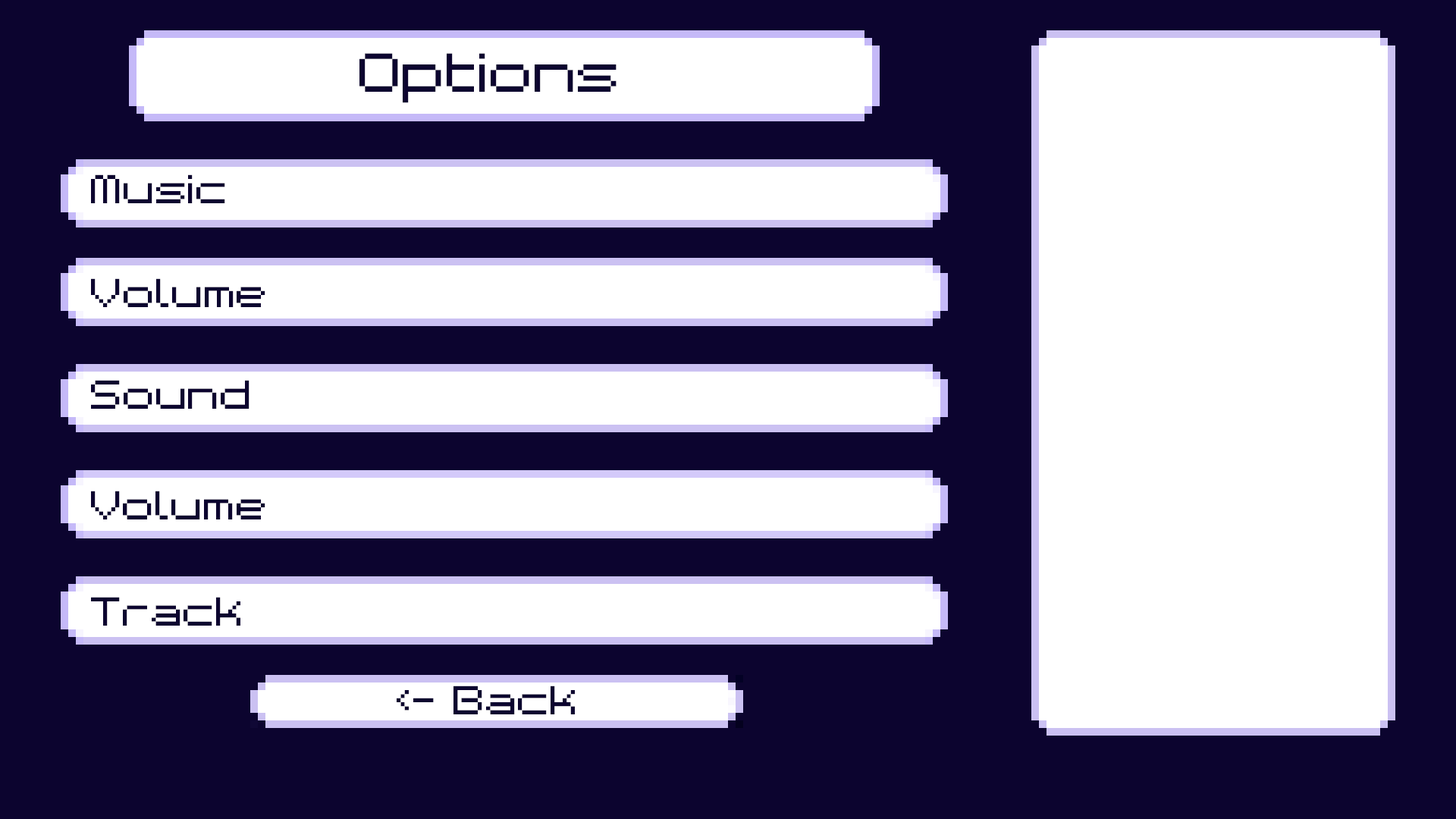
<style>
.page{position:relative;width:1456px;height:819px;background:#0c042f}
.page>*{position:absolute;margin:0}
.t1{font:49.3px "BMspaceA9";color:#0c042f}
.t2{font:36.4px "BMspaceA9";color:#0c042f}
</style>
<div class="page">
<p class="t1" style="left:359px;top:53px;width:258px;height:50px">Options</p>
<p class="t2" style="left:91px;top:174px;width:134px;height:29px">Music</p>
<p class="t2" style="left:91px;top:278px;width:174px;height:29px">Volume</p>
<p class="t2" style="left:91px;top:380px;width:158px;height:29px">Sound</p>
<p class="t2" style="left:91px;top:491px;width:174px;height:28px">Volume</p>
<p class="t2" style="left:91px;top:597px;width:149px;height:29px">Track</p>
<p class="t2" style="left:397px;top:686px;width:178px;height:28px">&lt;- Back</p>
</div>
